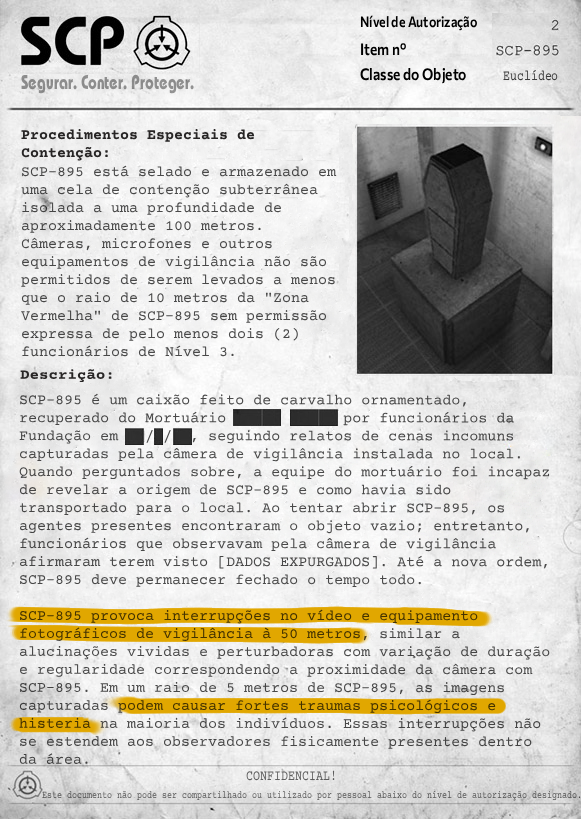
<style>
.page{position:relative;width:581px;height:819px}
.page>*{position:absolute;margin:0}
.t1{font:20px "BauhausC-Bold";color:#8d8d8d;scale:0.74 1}
.t2{font:14.6px "CourierPrime-Regular";color:#3c3c3c;scale:0.79 1}
.t3{font:15px "CourierPrime-Bold";color:#272525}
.t4{font:15px "CourierPrime-Regular";color:#484848}
.t5{font:14.2px "CourierPrime-Bold";color:#272525;scale:1.11 1}
.t6{font:14.8px "CourierPrime-Regular";color:#5e5e5e;scale:0.79 1}
.t7{font:10.6px "CourierPrime-Regular";color:#525252;scale:0.79 1}
</style>
<div class="page">
<p class="t1" style="left:21px;top:74px;width:173px;height:20px">Segurar. Conter. Proteger.</p>
<p class="t2" style="left:503px;top:69px;width:55px;height:12px">Euclídeo</p>
<p class="t3" style="left:21px;top:129px;width:234px;height:32px">Procedimentos Especiais de Contenção:</p>
<p class="t4" style="left:21px;top:165px;width:316px;height:192px">SCP-895 está selado e armazenado em uma cela de contenção subterrânea isolada a uma profundidade de aproximadamente 100 metros. Câmeras, microfones e outros equipamentos de vigilância não são permitidos de serem levados a menos que o raio de 10 metros da "Zona Vermelha" de SCP-895 sem permissão expressa de pelo menos dois (2) funcionários de Nível 3.</p>
<p class="t5" style="left:20px;top:369px;width:92px;height:14px">Descrição:</p>
<p class="t4" style="left:19px;top:393px;width:531px;height:371px">SCP-895 é um caixão feito de carvalho ornamentado, recuperado do Mortuário █████ █████ por funcionários da Fundação em ██/█/██, seguindo relatos de cenas incomuns capturadas pela câmera de vigilância instalada no local. Quando perguntados sobre, a equipe do mortuário foi incapaz de revelar a origem de SCP-895 e como havia sido transportado para o local. Ao tentar abrir SCP-895, os agentes presentes encontraram o objeto vazio; entretanto, funcionários que observavam pela câmera de vigilância afirmaram terem visto [DADOS EXPURGADOS]. Até a nova ordem, SCP-895 deve permanecer fechado o tempo todo.<br><br>SCP-895 provoca interrupções no vídeo e equipamento fotográficos de vigilância à 50 metros, similar a alucinações vividas e perturbadoras com variação de duração e regularidade correspondendo a proximidade da câmera com SCP-895. Em um raio de 5 metros de SCP-895, as imagens capturadas podem causar fortes traumas psicológicos e histeria na maioria dos indivíduos. Essas interrupções não se estendem aos observadores fisicamente presentes dentro da área.</p>
<p class="t6" style="left:246px;top:770px;width:89px;height:11px">CONFIDENCIAL!</p>
<p class="t7" style="left:42px;top:790px;width:539px;height:11px">Este documento não pode ser compartilhado ou utilizado por pessoal abaixo do nível de autorização designado.</p>
</div>
